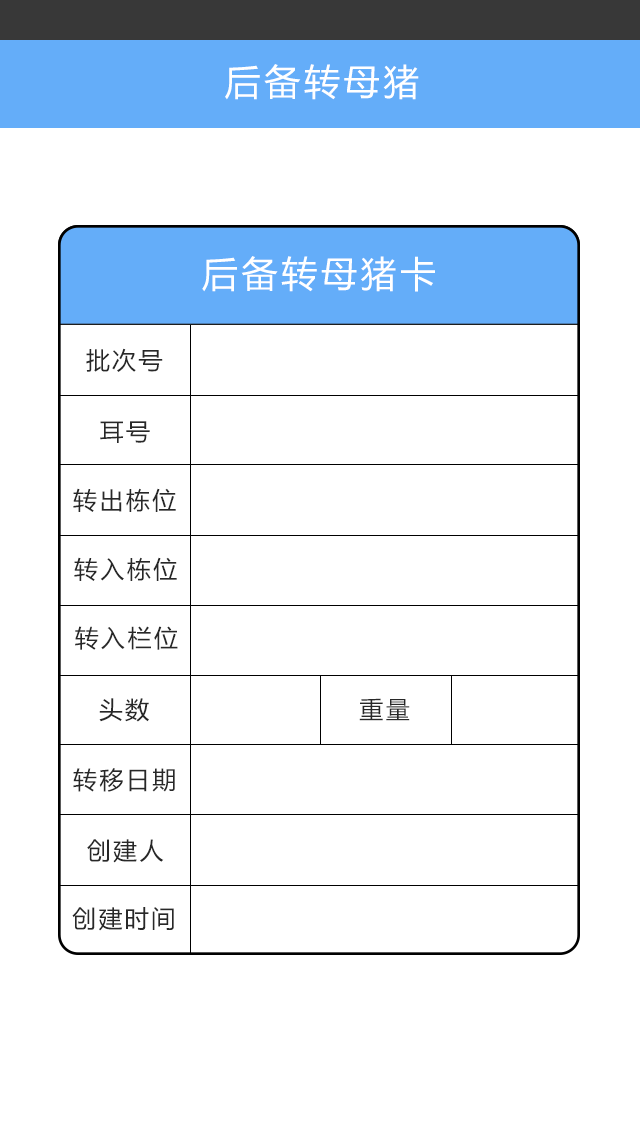
<style>
.page{position:relative;width:640px;height:1136px;background:#ffffff}
.page>*{position:absolute;margin:0}
.t1{font:36px "MicrosoftYaHei";letter-spacing:0.1em;color:#ffffff}
.t2{font:24px "MicrosoftYaHei";letter-spacing:0.1em;color:#282828}
</style>
<div class="page">
<p class="t1" style="left:225px;top:64px;width:194px;height:36px">后备转母猪</p>
<p class="t1" style="left:202px;top:256px;width:233px;height:36px">后备转母猪卡</p>
<p class="t2" style="left:86px;top:348px;width:77px;height:24px">批次号</p>
<p class="t2" style="left:100px;top:421px;width:50px;height:22px">耳号</p>
<p class="t2" style="left:73px;top:488px;width:103px;height:24px">转出栋位</p>
<p class="t2" style="left:74px;top:557px;width:103px;height:24px">转入栋位</p>
<p class="t2" style="left:75px;top:626px;width:103px;height:24px">转入栏位</p>
<p class="t2" style="left:99px;top:698px;width:50px;height:24px">头数</p>
<p class="t2" style="left:359px;top:698px;width:51px;height:23px">重量</p>
<p class="t2" style="left:73px;top:768px;width:102px;height:24px">转移日期</p>
<p class="t2" style="left:87px;top:839px;width:77px;height:24px">创建人</p>
<p class="t2" style="left:72px;top:907px;width:102px;height:24px">创建时间</p>
</div>
